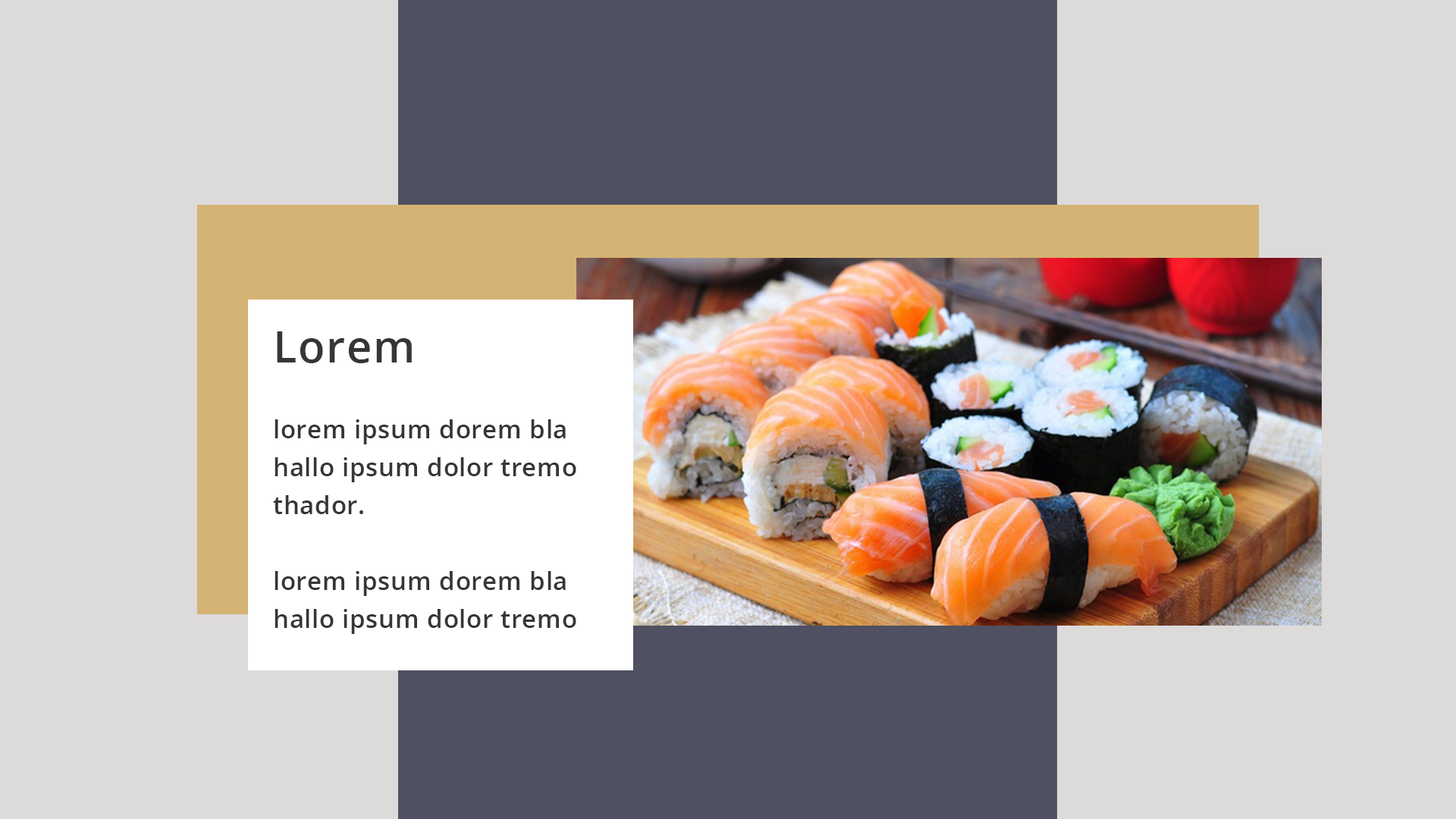
<style>
.page{position:relative;width:1456px;height:819px;background:#dddada}
.page>*{position:absolute;margin:0}
.t1{font:25.3px/37.9px "OpenSans-Semibold";letter-spacing:0.02em;color:#363636}
.t2{font:44.2px/37.9px "OpenSans-Semibold";letter-spacing:0.02em;color:#363636}
</style>
<div class="page">
<p class="t1" style="left:273px;top:331px;width:303px;height:303px"><span class="t2">Lorem<br><br></span>lorem ipsum dorem bla hallo ipsum dolor tremo thador.<br><br>lorem ipsum dorem bla hallo ipsum dolor tremo thador</p>
</div>
